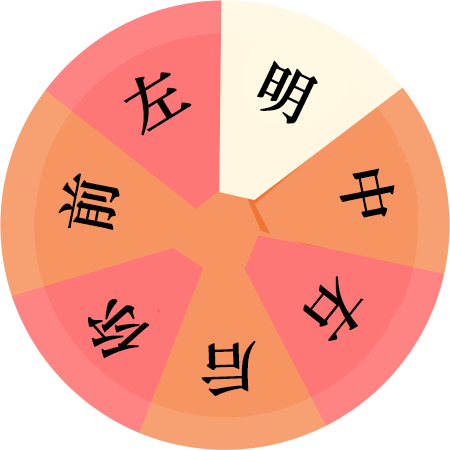
<style>
.page{position:relative;width:450px;height:450px;background:#f69562}
.page>*{position:absolute;margin:0}
.t1{font:60px "STZhongsong";color:#000000;font-weight:bold}
</style>
<div class="page">
<p class="t1" style="left:257px;top:60px;width:61px;height:64px;rotate:26deg">明</p>
<p class="t1" style="left:123px;top:72px;width:69px;height:64px;rotate:-32deg">左</p>
<p class="t1" style="left:58px;top:173px;width:62px;height:57px;rotate:-79deg">前</p>
<p class="t1" style="left:339px;top:168px;width:56px;height:50px;rotate:79deg">中</p>
<p class="t1" style="left:303px;top:276px;width:61px;height:65px;rotate:129deg">右</p>
<p class="t1" style="left:88px;top:299px;width:62px;height:60px;rotate:-132deg">你</p>
<p class="t1" style="left:201px;top:340px;width:55px;height:57px;rotate:178deg">后</p>
</div>
